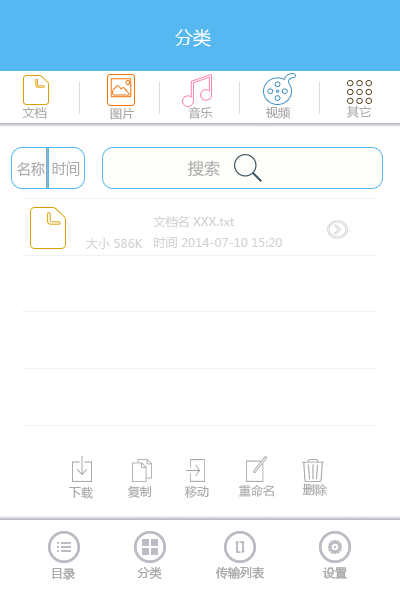
<style>
.page{position:relative;width:400px;height:600px;background:#ffffff}
.page>*{position:absolute;margin:0}
.t1{font:18px "MicrosoftYaHei";color:#ffffff}
.t2{font:12px "MicrosoftYaHei";color:#aaaaaa}
.t3{font:14.4px "MicrosoftYaHei";color:#aaaaaa}
.t4{font:16.2px "MicrosoftYaHei";color:#aaaaaa;scale:0.87 1}
.t5{font:16px "MicrosoftYaHei";color:#aaaaaa}
.t6{font:12px "MicrosoftYaHei";color:#d3d4d2}
.t7{font:12px "MicrosoftYaHei";color:#aaaaab}
.t8{font:12px "MicrosoftYaHei";color:#bcbcc4}
</style>
<div class="page">
<p class="t1" style="left:175px;top:29px;width:36px;height:18px">分类</p>
<p class="t2" style="left:22px;top:107px;width:25px;height:12px">文档</p>
<p class="t2" style="left:110px;top:108px;width:24px;height:12px">图片</p>
<p class="t2" style="left:188px;top:106px;width:25px;height:13px">音乐</p>
<p class="t2" style="left:266px;top:107px;width:25px;height:12px">视频</p>
<p class="t2" style="left:347px;top:105px;width:24px;height:13px">其它</p>
<p class="t3" style="left:17px;top:161px;width:28px;height:16px">名称</p>
<p class="t4" style="left:52px;top:161px;width:28px;height:15px">时间</p>
<p class="t5" style="left:188px;top:160px;width:32px;height:17px">搜索</p>
<p class="t6" style="left:153px;top:216px;width:129px;height:32px">文档名 XXX.txt<br>时间 2014-07-10 15:20</p>
<p class="t6" style="left:86px;top:238px;width:57px;height:11px">大小 586K</p>
<p class="t2" style="left:69px;top:486px;width:24px;height:13px">下载</p>
<p class="t2" style="left:128px;top:485px;width:23px;height:13px">复制</p>
<p class="t2" style="left:184px;top:485px;width:25px;height:13px">移动</p>
<p class="t2" style="left:238px;top:485px;width:36px;height:12px">重命名</p>
<p class="t2" style="left:303px;top:484px;width:24px;height:12px">删除</p>
<p class="t7" style="left:52px;top:568px;width:23px;height:12px">目录</p>
<p class="t2" style="left:52px;top:568px;width:23px;height:12px">目录</p>
<p class="t2" style="left:137px;top:566px;width:25px;height:13px">分类</p>
<p class="t2" style="left:137px;top:566px;width:25px;height:13px">分类</p>
<p class="t2" style="left:215px;top:566px;width:49px;height:13px">传输列表</p>
<p class="t2" style="left:215px;top:566px;width:49px;height:13px">传输列表</p>
<p class="t8" style="left:323px;top:567px;width:24px;height:12px">设置</p>
<p class="t2" style="left:323px;top:567px;width:24px;height:12px">设置</p>
</div>
